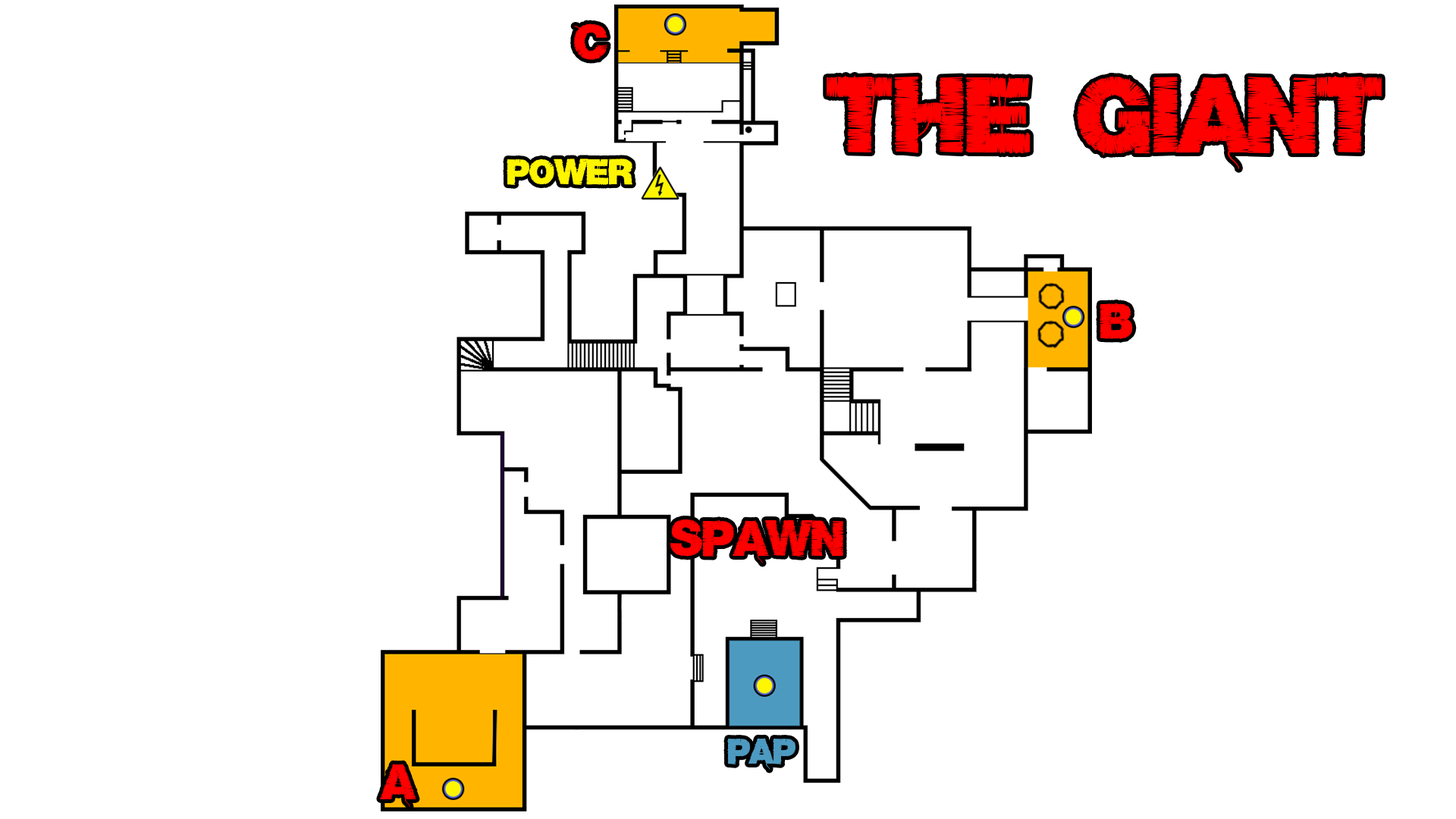
<style>
.page{position:relative;width:1456px;height:819px;background:#ffffff}
.page>*{position:absolute;margin:0}
.t1{font:44.2px "Base05";color:#ff0000}
.t2{font:94.8px "Base05";color:#ff0000}
.t3{font:31.6px "Base05";color:#fff500}
.t4{font:31.6px "Base05";color:#4d9ac1}
</style>
<div class="page">
<p class="t1" style="left:574px;top:24px;width:33px;height:36px">C</p>
<p class="t2" style="left:827px;top:76px;width:555px;height:93px">The Giant</p>
<p class="t3" style="left:507px;top:158px;width:125px;height:27px">Power</p>
<p class="t1" style="left:1100px;top:303px;width:33px;height:36px">B</p>
<p class="t1" style="left:670px;top:519px;width:173px;height:44px">Spawn</p>
<p class="t4" style="left:727px;top:738px;width:68px;height:32px">PAP</p>
<p class="t1" style="left:380px;top:764px;width:36px;height:43px">A</p>
</div>
